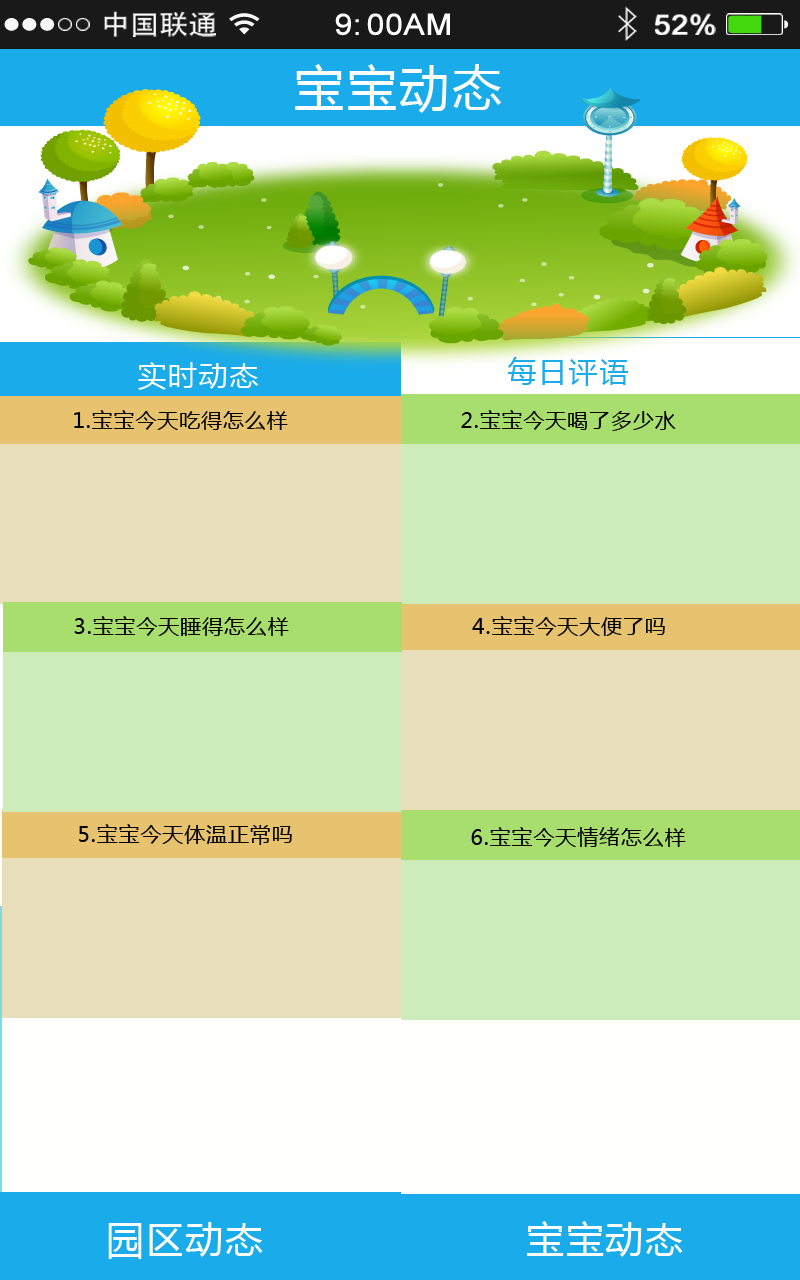
<style>
.page{position:relative;width:800px;height:1280px}
.page>*{position:absolute;margin:0}
.t1{font:26.8px "AdobeHeitiStd-Regular";color:#ffffff;scale:1.09 1}
.t2{font:29.2px "ArialMT";color:#ffffff;font-weight:bold;scale:1.09 1}
.t3{font:28px "ArialMT";color:#ffffff;font-weight:bold;scale:1.09 1}
.t4{font:50px "MicrosoftYaHei";letter-spacing:0.05em;color:#ffffff}
.t5{font:29.2px "MicrosoftYaHei";letter-spacing:0.05em;color:#fefefd}
.t6{font:29.2px "MicrosoftYaHei";letter-spacing:0.05em;color:#1aabea}
.t7{font:20.8px "MicrosoftYaHei";letter-spacing:0.05em;color:#010000}
.t8{font:37.5px "MicrosoftYaHei";letter-spacing:0.05em;color:#fffffe}
</style>
<div class="page">
<p class="t1" style="left:104px;top:11px;width:112px;height:26px">中国联通</p>
<p class="t2" style="left:335px;top:13px;width:115px;height:23px">9:00AM</p>
<p class="t3" style="left:655px;top:13px;width:61px;height:22px">52%</p>
<p class="t4" style="left:295px;top:64px;width:206px;height:49px">宝宝动态</p>
<p class="t5" style="left:138px;top:362px;width:120px;height:28px">实时动态</p>
<p class="t6" style="left:508px;top:357px;width:120px;height:29px">每日评语</p>
<p class="t7" style="left:74px;top:410px;width:214px;height:20px">1.宝宝今天吃得怎么样</p>
<p class="t7" style="left:461px;top:410px;width:215px;height:21px">2.宝宝今天喝了多少水</p>
<p class="t7" style="left:74px;top:616px;width:215px;height:20px">3.宝宝今天睡得怎么样</p>
<p class="t7" style="left:472px;top:616px;width:193px;height:20px">4.宝宝今天大便了吗</p>
<p class="t7" style="left:79px;top:824px;width:213px;height:21px">5.宝宝今天体温正常吗</p>
<p class="t7" style="left:471px;top:827px;width:215px;height:20px">6.宝宝今天情绪怎么样</p>
<p class="t8" style="left:108px;top:1222px;width:155px;height:37px">园区动态</p>
<p class="t8" style="left:527px;top:1221px;width:156px;height:36px">宝宝动态</p>
</div>
